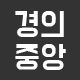
<style>
.page{position:relative;width:80px;height:80px;background:#333333}
.page>*{position:absolute;margin:0}
.t1{font:27.1px/33.3px "BMDoHyeon";color:#ffffff}
</style>
<div class="page">
<p class="t1" style="left:15px;top:11px;width:51px;height:59px;text-align:center">경의<br>중앙</p>
</div>
